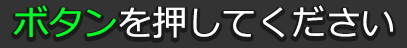
<style>
.page{position:relative;width:407px;height:48px;background:#333333}
.page>*{position:absolute;margin:0}
.t1{font:34.7px "Meiryo";color:#ffffff}
.t2{font:34.7px "Meiryo";color:#00ff26}
</style>
<div class="page">
<p class="t1" style="left:13px;top:5px;width:380px;height:33px"><span class="t2">ボタン</span>を押してください</p>
</div>
